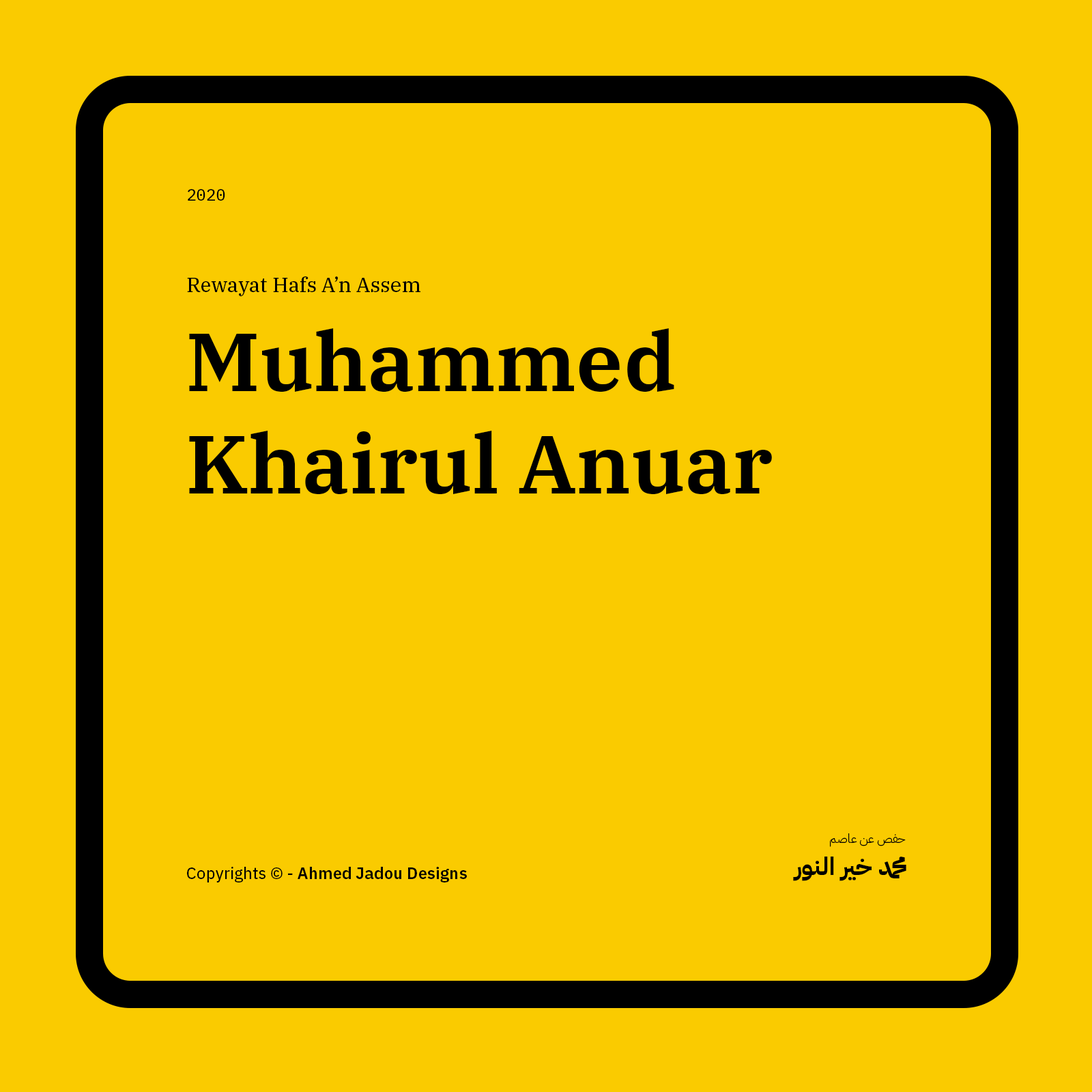
<style>
.page{position:relative;width:1092px;height:1092px;background:#facb00}
.page>*{position:absolute;margin:0}
.t1{font:16.4px "IBMPlexMono-Text";color:#000000}
.t2{font:20.5px "IBMPlexSerif-Text";color:#000000}
.t3{font:81.9px/102.7px "IBMPlexSerif-SemiBold";color:#000000}
.t4{font:12.3px "IBMPlexArabic-Light";color:#000000}
.t5{font:24.6px "IBMPlexArabic-Bold";color:#000000}
.t6{font:16.4px "IBMPlexSans-SemiBold";color:#000000}
.t7{font:16.4px "IBMPlexSans-Text";color:#000000}
</style>
<div class="page">
<p class="t1" style="left:188px;top:189px;width:37px;height:12px">2020</p>
<p class="t2" style="left:187px;top:276px;width:233px;height:20px">Rewayat Hafs A’n Assem</p>
<p class="t3" style="left:189px;top:328px;width:583px;height:166px">Muhammed Khairul Anuar</p>
<p class="t4" style="left:830px;top:833px;width:76px;height:14px">حفص عن عاصم</p>
<p class="t5" style="left:793px;top:857px;width:113px;height:24px">محمد خير النور</p>
<p class="t6" style="left:187px;top:867px;width:280px;height:15px"><span class="t7">Copyrights © - </span>Ahmed Jadou Designs</p>
</div>
